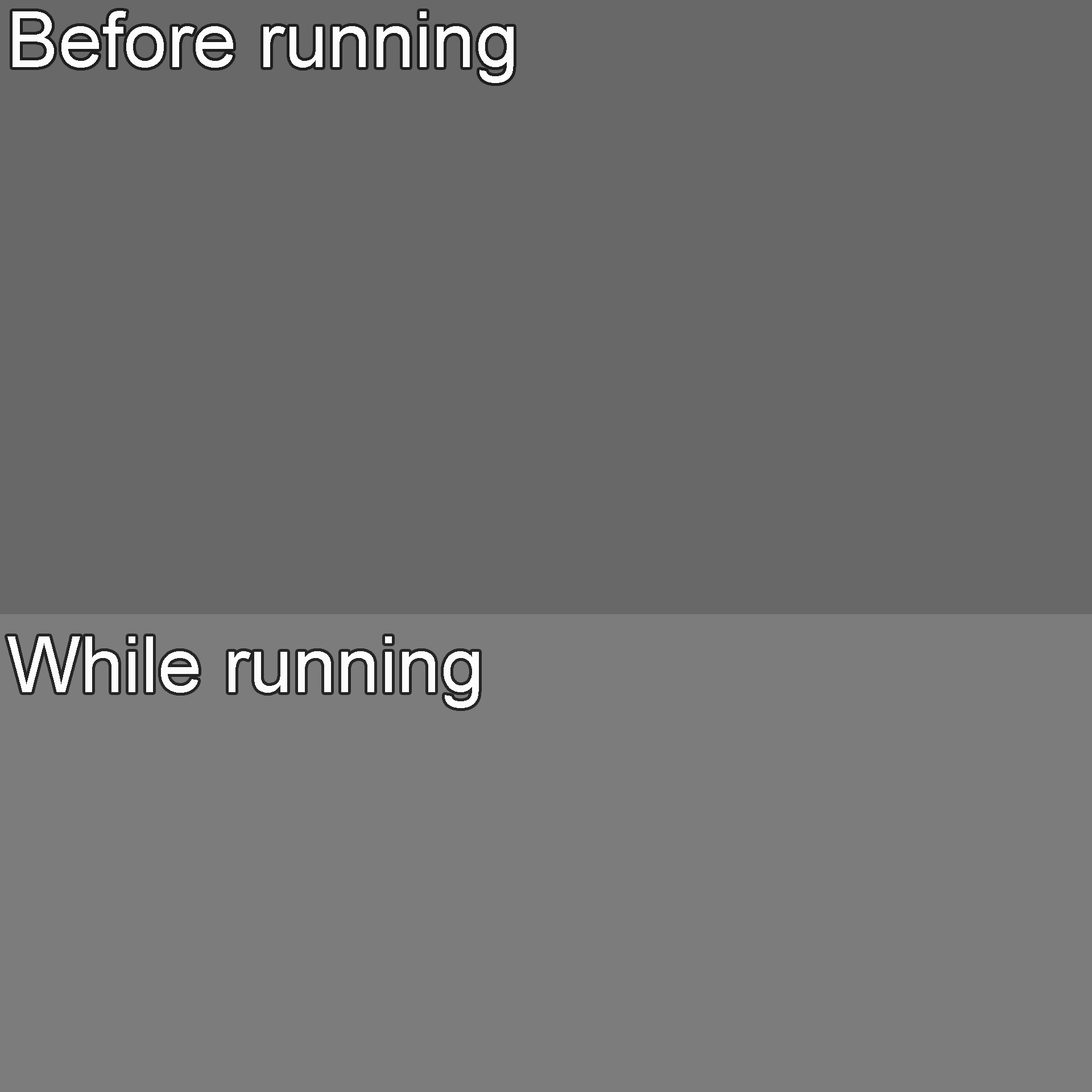
<style>
.page{position:relative;width:1092px;height:1092px;background:#686868}
.page>*{position:absolute;margin:0}
.t1{font:78.1px "ArialMT";color:#fcfcfc}
</style>
<div class="page">
<p class="t1" style="left:13px;top:11px;width:501px;height:72px">Before running</p>
<p class="t1" style="left:7px;top:636px;width:472px;height:72px">While running</p>
</div>
